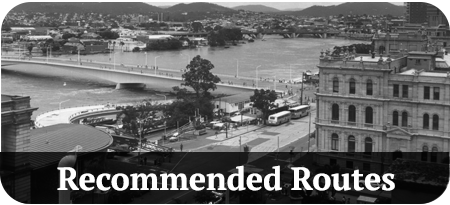
<style>
.page{position:relative;width:450px;height:205px}
.page>*{position:absolute;margin:0}
.t1{font:32px "PTSerif-Bold";color:#ffffff}
</style>
<div class="page">
<p class="t1" style="left:57px;top:165px;width:338px;height:26px">Recommended Routes</p>
</div>
